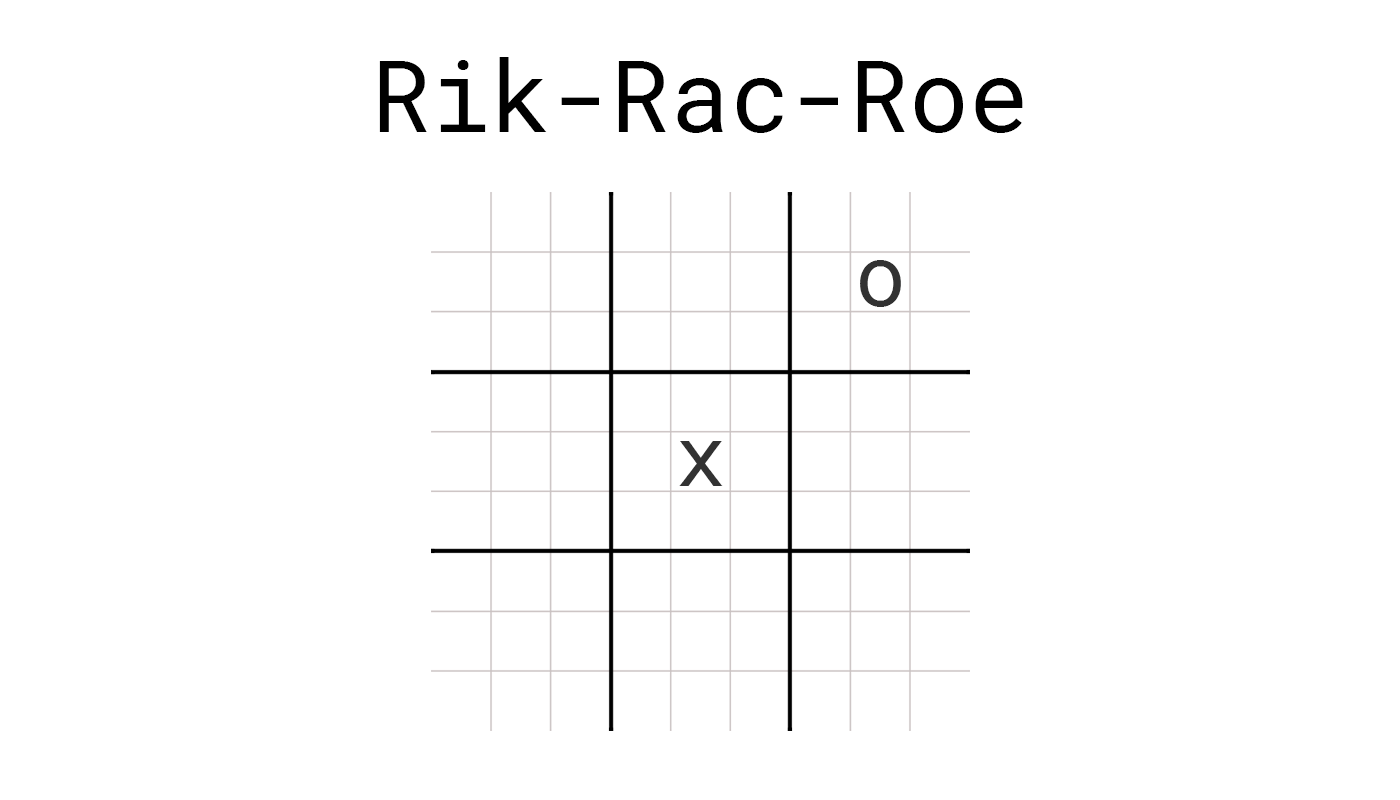
<style>
.page{position:relative;width:1400px;height:800px;background:#ffffff}
.page>*{position:absolute;margin:0}
.t1{font:99.5px "RobotoMono-Regular";color:#000000}
.t2{font:84.7px "RobotoMono-Regular";color:#323232}
</style>
<div class="page">
<p class="t1" style="left:379px;top:57px;width:644px;height:76px">Rik-Rac-Roe</p>
<p class="t2" style="left:860px;top:260px;width:41px;height:47px">o</p>
<p class="t2" style="left:679px;top:441px;width:44px;height:45px">x</p>
</div>
